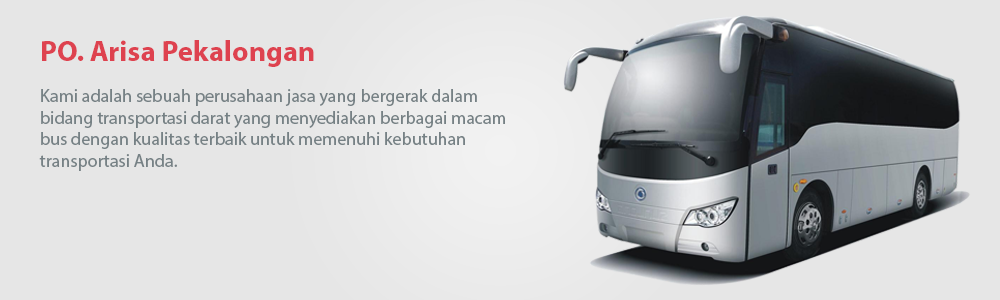
<style>
.page{position:relative;width:1000px;height:300px;background:#e6e6e6}
.page>*{position:absolute;margin:0}
.t1{font:29px "MyriadPro-Bold";color:#de424f}
.t2{font:18px "MyriadPro-Regular";color:#768185}
</style>
<div class="page">
<p class="t1" style="left:42px;top:40px;width:272px;height:27px">PO. Arisa Pekalongan</p>
<p class="t2" style="left:39px;top:89px;width:466px;height:82px">Kami adalah sebuah perusahaan jasa yang bergerak dalam<br>bidang transportasi darat yang menyediakan berbagai macam<br>bus dengan kualitas terbaik untuk memenuhi kebutuhan<br>transportasi Anda.</p>
</div>
